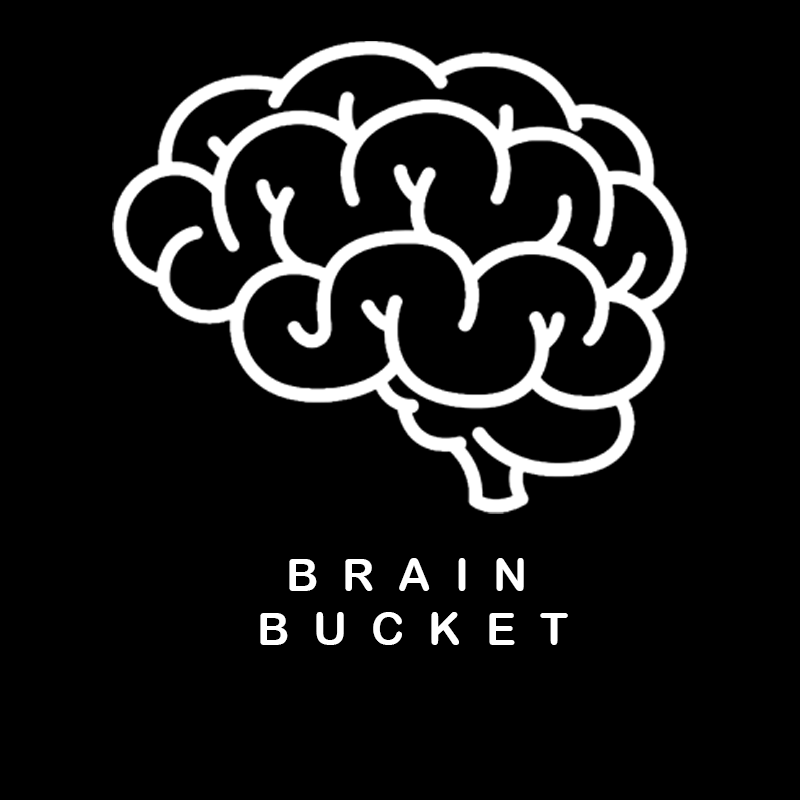
<style>
.page{position:relative;width:800px;height:800px;background:#000000}
.page>*{position:absolute;margin:0}
.t1{font:44.6px "ArialRoundedMTBold";letter-spacing:0.015em;color:#ffffff;text-transform:uppercase}
</style>
<div class="page">
<p class="t1" style="left:260px;top:558px;width:308px;height:87px;text-align:center">B  r  a  i  n  <br>b  u  c  k  e  t</p>
</div>
